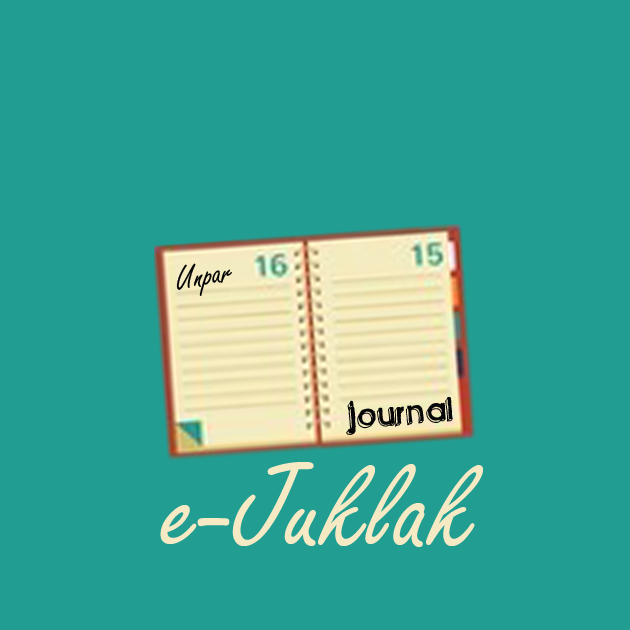
<style>
.page{position:relative;width:630px;height:630px;background:#219d92}
.page>*{position:absolute;margin:0}
.t1{font:35.7px "FreestyleScript-Regular";color:#030303}
.t2{font:50.8px "Greenpiloww";color:#070707}
.t3{font:130.2px "FreestyleScript-Regular";color:#f6eac5}
</style>
<div class="page">
<p class="t1" style="left:176px;top:263px;width:56px;height:33px;rotate:-9deg">Unpar</p>
<p class="t2" style="left:346px;top:396px;width:107px;height:39px;rotate:-5deg">Journal</p>
<p class="t3" style="left:160px;top:462px;width:323px;height:85px">e-Juklak</p>
</div>
